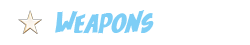
<style>
.page{position:relative;width:250px;height:45px;background:#ffffff}
.page>*{position:absolute;margin:0}
.t1{font:30px "HoustonComicsPersonalUse";color:#7ecef6}
</style>
<div class="page">
<p class="t1" style="left:55px;top:10px;width:99px;height:24px">WEAPONS</p>
</div>
